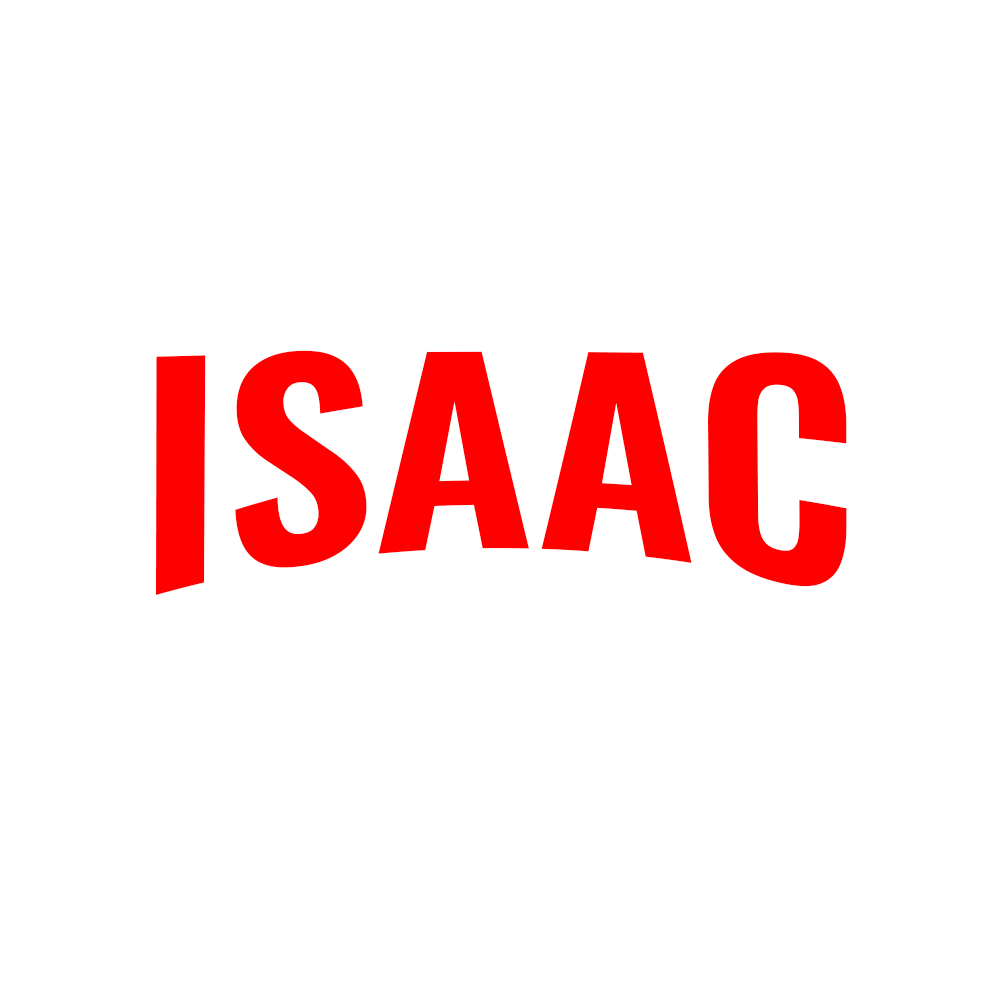
<style>
.page{position:relative;width:1000px;height:1000px;background:#ffffff}
.page>*{position:absolute;margin:0}
.t1{font:300px "Oswald_592.000wght";color:#ff0000}
</style>
<div class="page">
<p class="t1" style="left:156px;top:350px;width:691px;height:245px">ISAAC</p>
</div>
